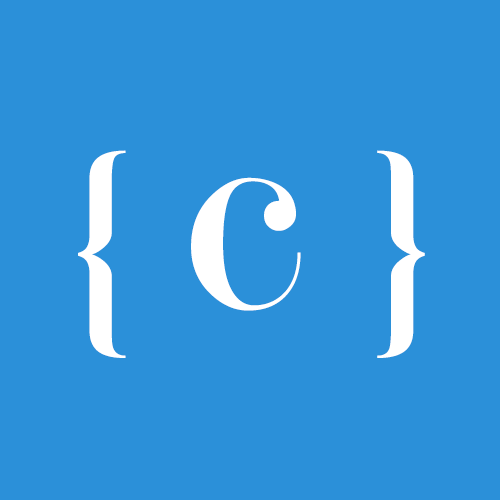
<style>
.page{position:relative;width:500px;height:500px;background:#2b90d9}
.page>*{position:absolute;margin:0}
.t1{font:240.3px "Modern-Regular";letter-spacing:0.16em;color:#ffffff;font-weight:bold}
.t2{font:303.3px "Modern-Regular";letter-spacing:0.2em;color:#ffffff;font-weight:bold}
.t3{font:240.3px "Modern-Regular";letter-spacing:0.2em;color:#ffffff;font-weight:bold}
</style>
<div class="page">
<p class="t1" style="left:78px;top:150px;width:347px;height:208px">{<span class="t2">c</span><span class="t3">}</span></p>
</div>
